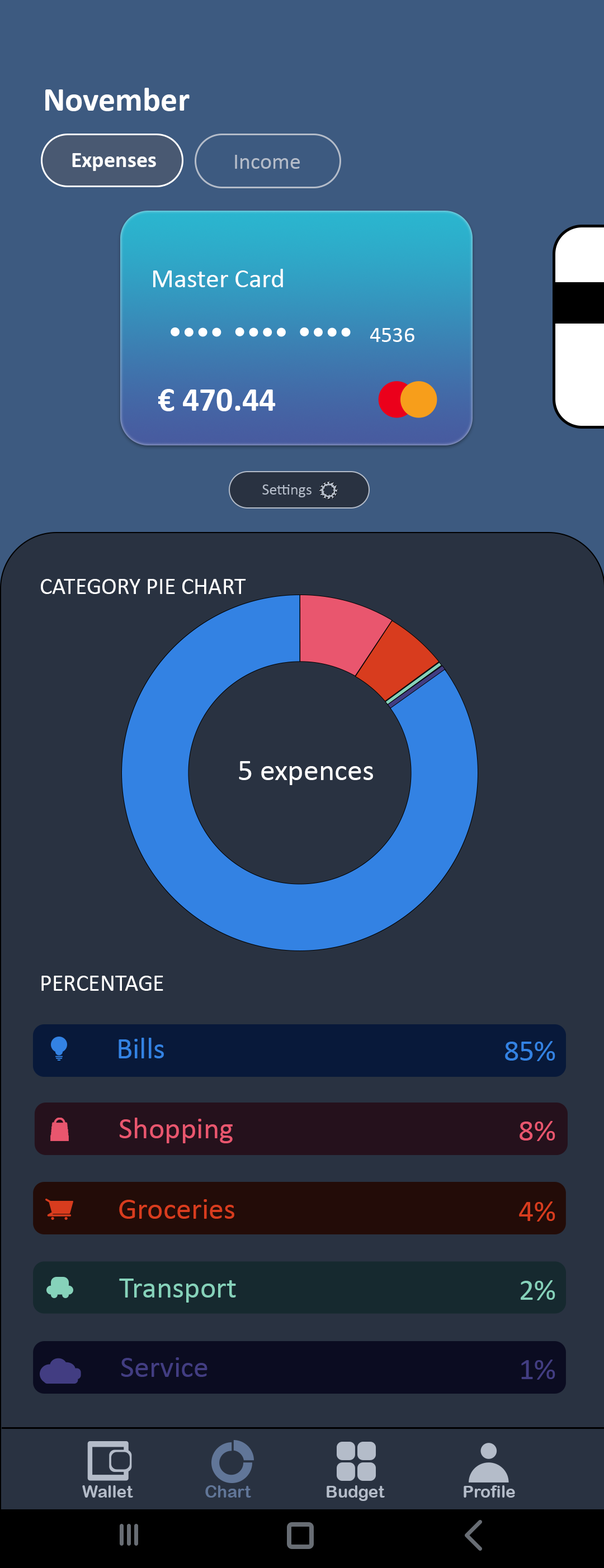
<style>
.page{position:relative;width:604px;height:1568px;background:#293241}
.page>*{position:absolute;margin:0}
.t1{font:33.5px "Calibri-Bold";color:#ffffff}
.t2{font:22.4px "Calibri-Bold";color:#ffffff}
.t3{font:22.4px "Calibri";color:#b4bcc9}
.t4{font:26.8px "Calibri";color:#ffffff}
.t5{font:22.4px "Calibri";color:#ffffff}
.t6{font:15.6px "Calibri";color:#b4bcc9}
.t7{font:23.5px "Calibri";color:#ffffff}
.t8{font:30.2px "Calibri";color:#ffffff}
.t9{font:30.3px "Calibri";color:#3382e3}
.t10{font:30.3px "Calibri";color:#e9566e}
.t11{font:30.3px "Calibri";color:#d83c1e}
.t12{font:30.3px "Calibri";color:#86d2ba}
.t13{font:30.3px "Calibri";color:#423d82}
.t14{font:16.8px "ArialRoundedMTBold";color:#b4bcc9}
.t15{font:16.8px "ArialRoundedMTBold";color:#617698}
</style>
<div class="page">
<p class="t1" style="left:45px;top:88px;width:144px;height:23px">November</p>
<p class="t2" style="left:72px;top:153px;width:84px;height:18px">Expenses</p>
<p class="t3" style="left:235px;top:155px;width:65px;height:14px">Income</p>
<p class="t4" style="left:153px;top:269px;width:130px;height:18px">Master Card</p>
<p class="t5" style="left:369px;top:328px;width:45px;height:14px">4536</p>
<p class="t1" style="left:158px;top:389px;width:117px;height:22px">€ 470.44</p>
<p class="t6" style="left:262px;top:484px;width:49px;height:13px">Settings</p>
<p class="t7" style="left:41px;top:579px;width:205px;height:15px">CATEGORY PIE CHART</p>
<p class="t8" style="left:239px;top:761px;width:134px;height:24px">5 expences</p>
<p class="t7" style="left:41px;top:976px;width:122px;height:15px">PERCENTAGE</p>
<p class="t9" style="left:118px;top:1038px;width:46px;height:20px">Bills</p>
<p class="t9" style="left:505px;top:1041px;width:50px;height:20px">85%</p>
<p class="t10" style="left:119px;top:1118px;width:113px;height:25px">Shopping</p>
<p class="t10" style="left:519px;top:1121px;width:36px;height:20px">8%</p>
<p class="t11" style="left:119px;top:1199px;width:115px;height:20px">Groceries</p>
<p class="t11" style="left:519px;top:1201px;width:36px;height:21px">4%</p>
<p class="t12" style="left:119px;top:1279px;width:117px;height:24px">Transport</p>
<p class="t12" style="left:520px;top:1280px;width:35px;height:20px">2%</p>
<p class="t13" style="left:121px;top:1357px;width:86px;height:20px">Service</p>
<p class="t13" style="left:521px;top:1360px;width:34px;height:20px">1%</p>
<p class="t14" style="left:82px;top:1485px;width:51px;height:13px">Wallet</p>
<p class="t15" style="left:205px;top:1485px;width:46px;height:13px">Chart</p>
<p class="t14" style="left:326px;top:1485px;width:58px;height:16px">Budget</p>
<p class="t14" style="left:463px;top:1485px;width:52px;height:13px">Profile</p>
</div>
